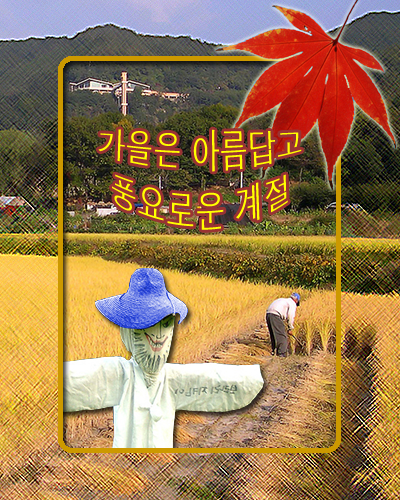
<style>
.page{position:relative;width:400px;height:500px}
.page>*{position:absolute;margin:0}
.t1{font:28px/36px "Dotum";color:#ffff00}
</style>
<div class="page">
<p class="t1" style="left:98px;top:129px;width:204px;height:101px;text-align:center">가을은 아름답고<br>풍요로운 계절</p>
</div>
